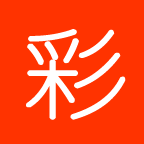
<style>
.page{position:relative;width:144px;height:144px;background:#ff3300}
.page>*{position:absolute;margin:0}
.t1{font:100px "YouYuan";color:#ffffff;font-weight:bold;scale:1.1 1}
</style>
<div class="page">
<p class="t1" style="left:26px;top:29px;width:100px;height:91px">彩</p>
</div>
